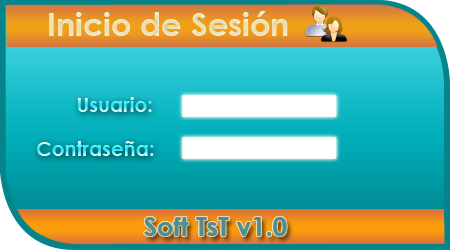
<style>
.page{position:relative;width:450px;height:250px}
.page>*{position:absolute;margin:0}
.t1{font:32px "CenturyGothic-Bold";color:#efe1bb}
.t2{font:20px "CenturyGothic-Bold"}
.t3{font:26px "CenturyGothic-Bold";color:#4b8e93}
</style>
<div class="page">
<p class="t1" style="left:49px;top:11px;width:239px;height:25px">Inicio de Sesión</p>
<p class="t2" style="left:78px;top:97px;width:74px;height:15px">Usuario:</p>
<p class="t2" style="left:37px;top:141px;width:117px;height:15px">Contraseña:</p>
<p class="t3" style="left:144px;top:217px;width:143px;height:19px">Soft TsT v1.0</p>
</div>
